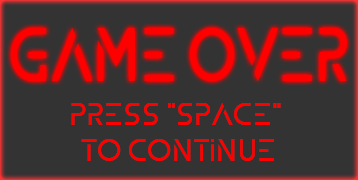
<style>
.page{position:relative;width:358px;height:180px;background:#333333}
.page>*{position:absolute;margin:0}
.t1{font:72px "ZELDA";color:#ff0000;scale:0.81 1}
.t2{font:30px "ZELDA";color:#ff0000}
</style>
<div class="page">
<p class="t1" style="left:11px;top:28px;width:336px;height:53px">Game Over</p>
<p class="t2" style="left:71px;top:103px;width:210px;height:58px;text-align:center">Press "Space" <br>to Continue</p>
</div>
